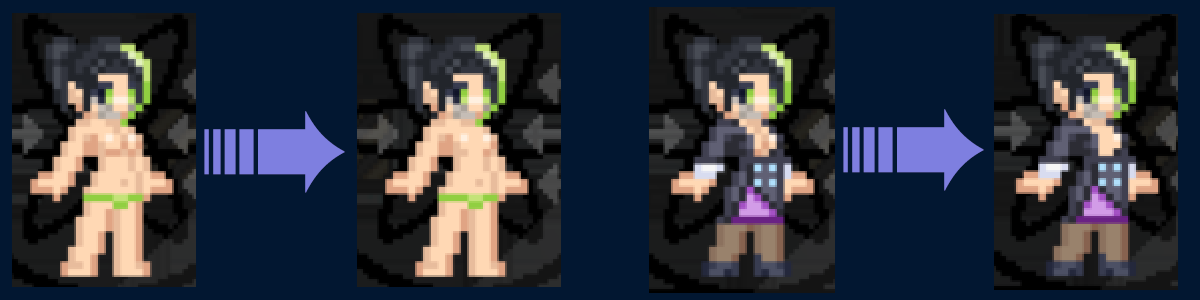
<style>
.page{position:relative;width:1200px;height:300px;background:#021731}
.page>*{position:absolute;margin:0}
.t1{font:172px "Meiryo";color:#7e7fe0}
</style>
<div class="page">
<p class="t1" style="left:204px;top:111px;width:141px;height:82px">➠</p>
<p class="t1" style="left:843px;top:109px;width:141px;height:82px">➠</p>
</div>
